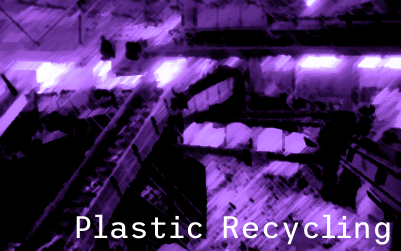
<style>
.page{position:relative;width:401px;height:251px;background:#000000}
.page>*{position:absolute;margin:0}
.t1{font:31px "Trispace-Regular";color:#ffffff}
</style>
<div class="page">
<p class="t1" style="left:76px;top:214px;width:314px;height:31px">Plastic Recycling</p>
</div>
